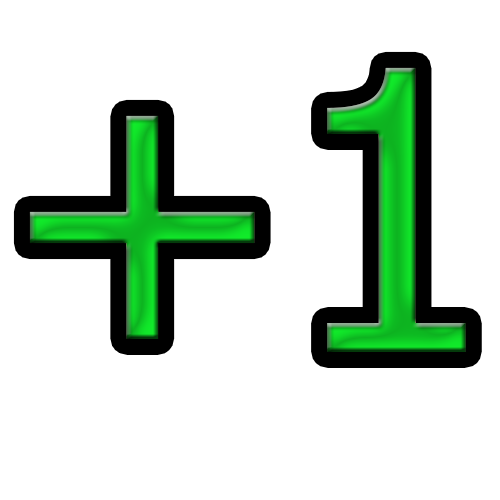
<style>
.page{position:relative;width:500px;height:500px;background:#ffffff}
.page>*{position:absolute;margin:0}
.t1{font:391px "Tahoma"}
</style>
<div class="page">
<p class="t1" style="left:29px;top:67px;width:437px;height:285px">+1</p>
</div>
